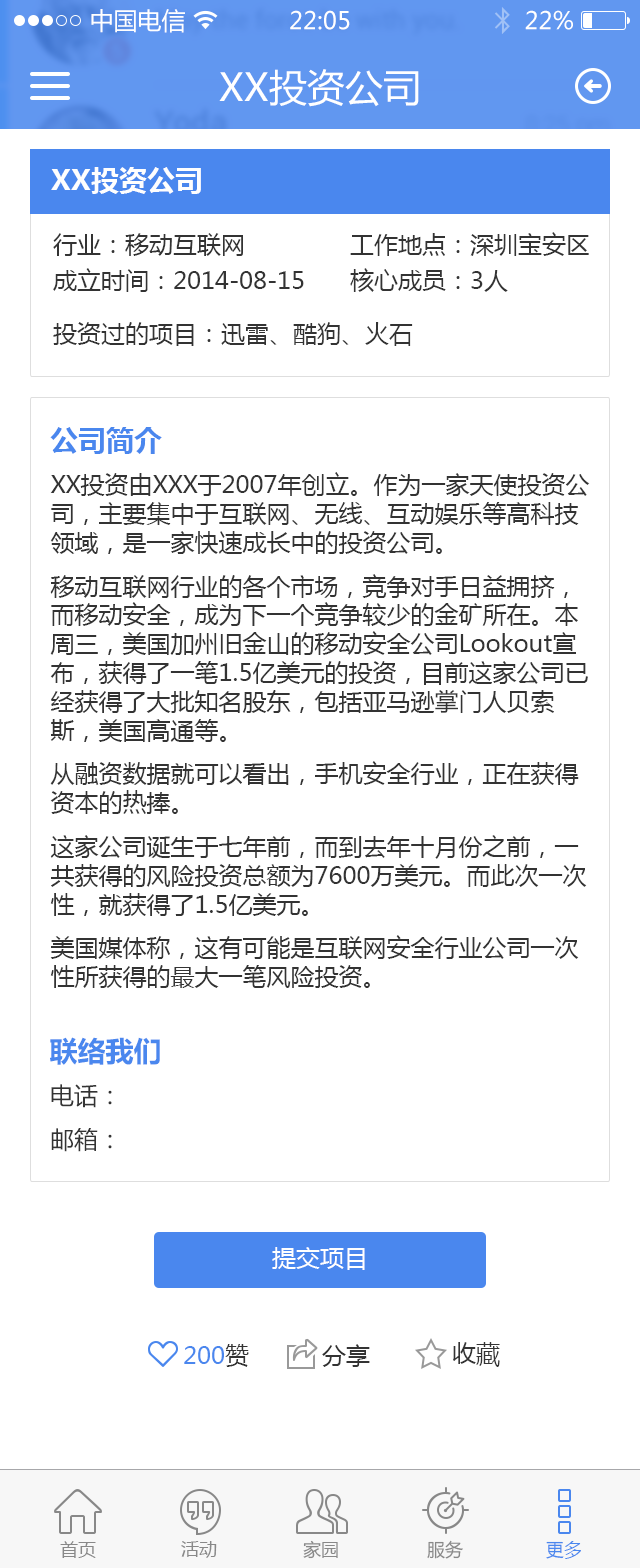
<style>
.page{position:relative;width:640px;height:1568px;background:#ffffff}
.page>*{position:absolute;margin:0}
.t1{font:24px "MicrosoftYaHei";color:#ffffff}
.t2{font:38px "MicrosoftYaHei";color:#ffffff}
.t3{font:28px "MicrosoftYaHei-Bold";color:#fefefe}
.t4{font:24px/36px "MicrosoftYaHei";color:#333333}
.t5{font:24px "MicrosoftYaHei";color:#333333}
.t6{font:28px "MicrosoftYaHei-Bold";color:#4a87ee}
.t7{font:24px "MicrosoftYaHei";color:#4a87ee}
.t8{font:18px "MicrosoftYaHei";color:#888888}
.t9{font:18px "MicrosoftYaHei";color:#4a87ee}
</style>
<div class="page">
<p class="t1" style="left:91px;top:9px;width:94px;height:24px">中国电信</p>
<p class="t1" style="left:290px;top:10px;width:60px;height:20px">22:05</p>
<p class="t1" style="left:525px;top:10px;width:48px;height:20px">22%</p>
<p class="t2" style="left:219px;top:69px;width:200px;height:38px">XX投资公司</p>
<p class="t3" style="left:51px;top:167px;width:150px;height:27px">XX投资公司</p>
<p class="t4" style="left:53px;top:233px;width:251px;height:59px">行业：移动互联网<br>成立时间：2014-08-15</p>
<p class="t4" style="left:350px;top:232px;width:239px;height:60px">工作地点：深圳宝安区<br>核心成员：3人</p>
<p class="t5" style="left:53px;top:322px;width:360px;height:24px">投资过的项目：迅雷、酷狗、火石</p>
<p class="t6" style="left:50px;top:427px;width:112px;height:27px">公司简介</p>
<p class="t5" style="left:50px;top:472px;width:540px;height:516px">XX投资由XXX于2007年创立。作为一家天使投资公司，主要集中于互联网、无线、互动娱乐等高科技领域，是一家快速成长中的投资公司。<br>移动互联网行业的各个市场，竞争对手日益拥挤，而移动安全，成为下一个竞争较少的金矿所在。本周三，美国加州旧金山的移动安全公司Lookout宣布，获得了一笔1.5亿美元的投资，目前这家公司已经获得了大批知名股东，包括亚马逊掌门人贝索斯，美国高通等。<br>从融资数据就可以看出，手机安全行业，正在获得资本的热捧。<br>这家公司诞生于七年前，而到去年十月份之前，一共获得的风险投资总额为7600万美元。而此次一次性，就获得了1.5亿美元。<br>美国媒体称，这有可能是互联网安全行业公司一次性所获得的最大一笔风险投资。</p>
<p class="t6" style="left:50px;top:1037px;width:110px;height:28px">联络我们</p>
<p class="t5" style="left:51px;top:1084px;width:61px;height:68px">电话：<br>邮箱：</p>
<p class="t1" style="left:272px;top:1247px;width:93px;height:23px">提交项目</p>
<p class="t7" style="left:184px;top:1344px;width:65px;height:23px">200<span class="t5">赞</span></p>
<p class="t5" style="left:322px;top:1344px;width:48px;height:23px">分享</p>
<p class="t5" style="left:453px;top:1342px;width:47px;height:25px">收藏</p>
<p class="t8" style="left:60px;top:1541px;width:36px;height:17px">首页</p>
<p class="t8" style="left:181px;top:1541px;width:36px;height:17px">活动</p>
<p class="t8" style="left:303px;top:1540px;width:35px;height:19px">家园</p>
<p class="t8" style="left:427px;top:1540px;width:36px;height:19px">服务</p>
<p class="t9" style="left:546px;top:1541px;width:35px;height:18px">更多</p>
</div>
